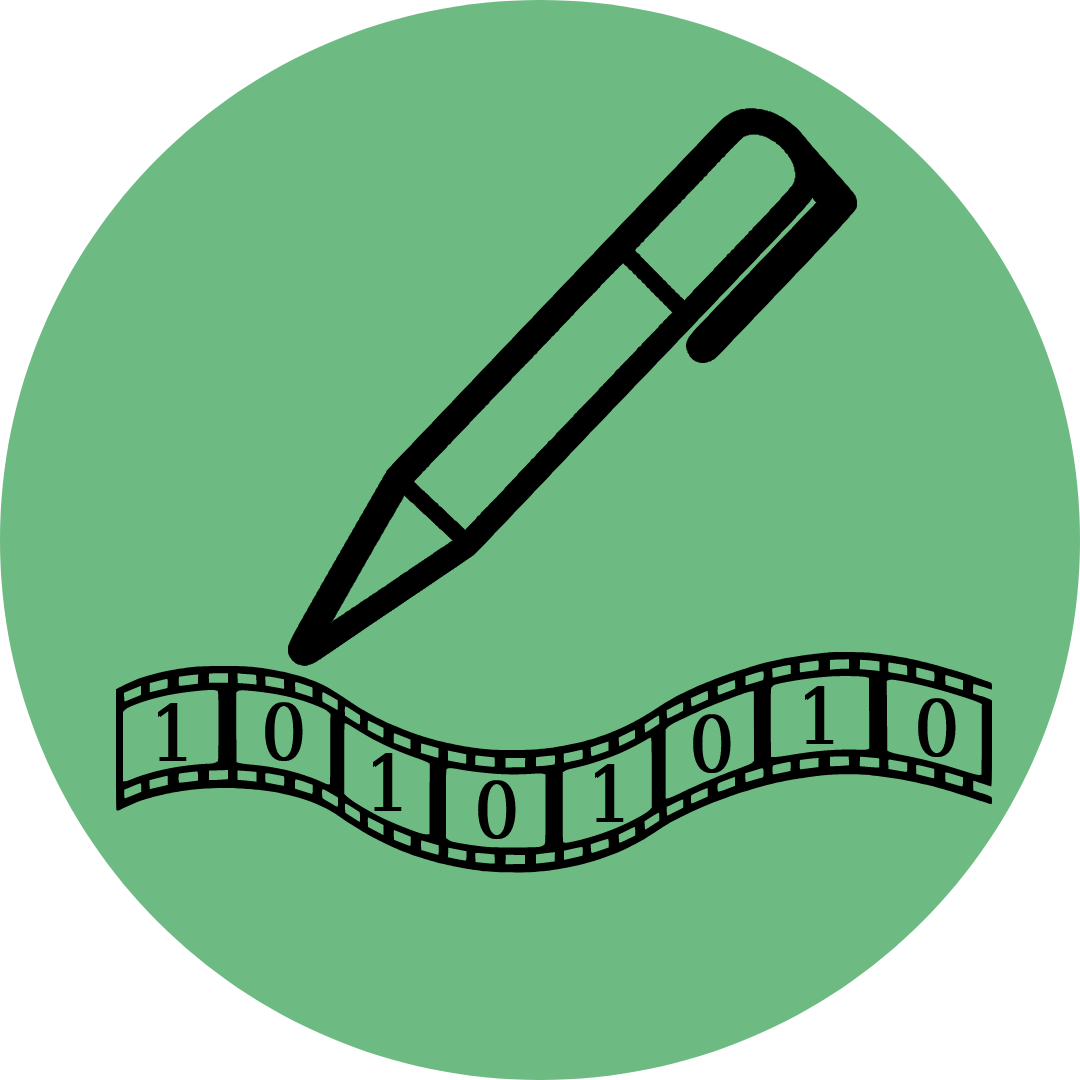
<style>
.page{position:relative;width:1080px;height:1080px;background:#6dba83}
.page>*{position:absolute;margin:0}
.t1{font:78px "DejaVuSerifCondensed";color:#000000;font-weight:bold}
</style>
<div class="page">
<p class="t1" style="left:805px;top:686px;width:29px;height:58px">1</p>
<p class="t1" style="left:265px;top:702px;width:38px;height:60px">0</p>
<p class="t1" style="left:918px;top:698px;width:38px;height:60px">0</p>
<p class="t1" style="left:158px;top:703px;width:29px;height:58px">1</p>
<p class="t1" style="left:693px;top:714px;width:38px;height:60px">0</p>
<p class="t1" style="left:373px;top:753px;width:29px;height:58px">1</p>
<p class="t1" style="left:595px;top:764px;width:29px;height:58px">1</p>
<p class="t1" style="left:478px;top:780px;width:38px;height:60px">0</p>
</div>
